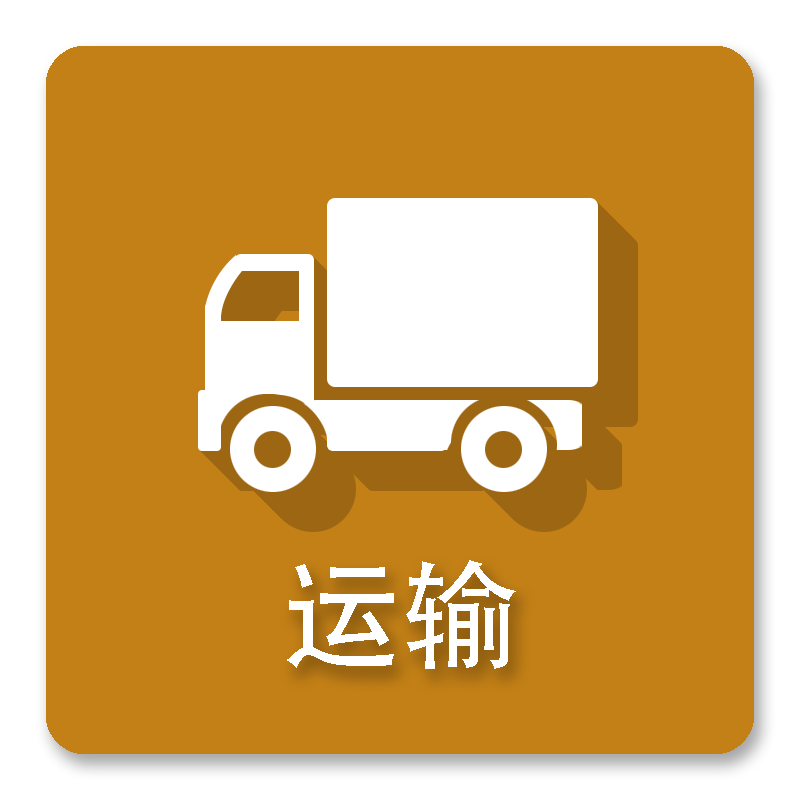
<style>
.page{position:relative;width:800px;height:800px;background:#c38016}
.page>*{position:absolute;margin:0}
.t1{font:120px "STHeitiSC-Medium";color:#ffffff}
</style>
<div class="page">
<p class="t1" style="left:287px;top:560px;width:229px;height:109px">运输</p>
</div>
